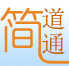
<style>
.page{position:relative;width:69px;height:66px}
.page>*{position:absolute;margin:0}
.t1{font:24px "NSimSun";color:#c96300}
</style>
<div class="page">
<p class="t1" style="left:42px;top:7px;width:23px;height:23px">道</p>
<p class="t1" style="left:42px;top:33px;width:23px;height:22px">通</p>
</div>
